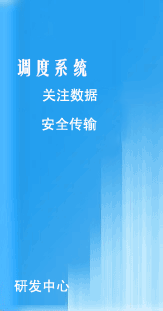
<style>
.page{position:relative;width:163px;height:311px}
.page>*{position:absolute;margin:0}
.t1{font:18px "FZYTK--GBK1-0";color:#fdfbfb;font-weight:bold}
.t2{font:14px "SimHei";color:#fefbfb}
</style>
<div class="page">
<p class="t1" style="left:17px;top:58px;width:70px;height:19px">调度系统</p>
<p class="t2" style="left:42px;top:88px;width:56px;height:14px">关注数据</p>
<p class="t2" style="left:42px;top:117px;width:55px;height:14px">安全传输</p>
<p class="t2" style="left:14px;top:279px;width:56px;height:14px">研发中心</p>
</div>
